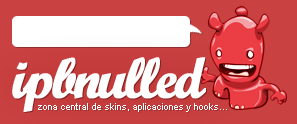
<style>
.page{position:relative;width:297px;height:124px;background:#c94141}
.page>*{position:absolute;margin:0}
.t1{font:57px "ScriptMTBold";letter-spacing:-0.08em;color:#ffffff;font-weight:bold}
.t2{font:15px "CordiaNew";color:#ffffff}
</style>
<div class="page">
<p class="t1" style="left:12px;top:57px;width:194px;height:55px">ipbnulled</p>
<p class="t2" style="left:38px;top:103px;width:189px;height:9px">zona central de skins, aplicaciones y hooks...</p>
</div>
